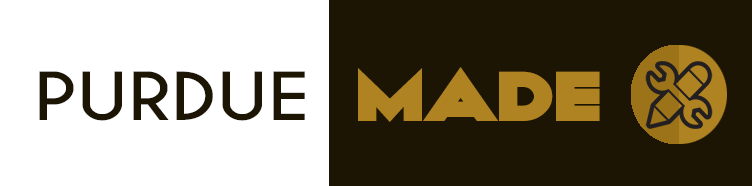
<style>
.page{position:relative;width:752px;height:186px;background:#1c1504}
.page>*{position:absolute;margin:0}
.t1{font:62px "CaviarDreams-Bold";letter-spacing:0.01em;color:#1c1504;scale:1.2 1}
.t2{font:72px "KiloGram";letter-spacing:0.01em;color:#b08322;scale:1.2 1}
</style>
<div class="page">
<p class="t1" style="left:39px;top:71px;width:266px;height:50px">PURDUE</p>
<p class="t2" style="left:358px;top:67px;width:242px;height:55px">MADE</p>
</div>
